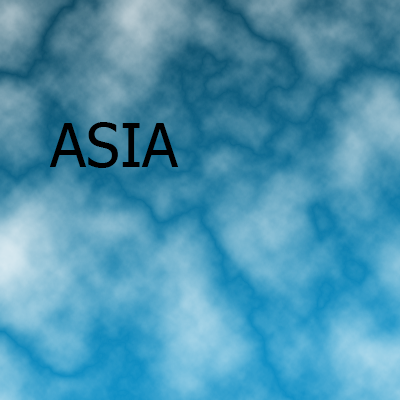
<style>
.page{position:relative;width:400px;height:400px}
.page>*{position:absolute;margin:0}
.t1{font:60px "Tahoma";color:#000000;text-transform:uppercase}
.t2{font:21px "Tahoma";color:#000000;text-transform:uppercase}
</style>
<div class="page">
<p class="t1" style="left:49px;top:122px;width:130px;height:46px"><span class="t2">                  </span>ASIA</p>
</div>
